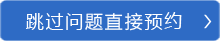
<style>
.page{position:relative;width:220px;height:41px;background:#2e6bc5}
.page>*{position:absolute;margin:0}
.t1{font:18px "MicrosoftYaHei";letter-spacing:0.1em;color:#ffffff}
</style>
<div class="page">
<p class="t1" style="left:26px;top:12px;width:156px;height:19px">跳过问题直接预约</p>
</div>
